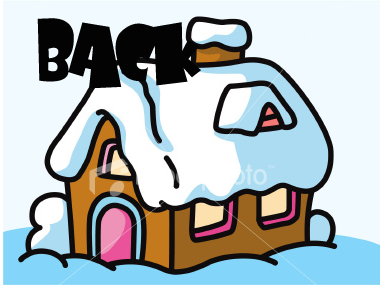
<style>
.page{position:relative;width:380px;height:285px;background:#f1faff}
.page>*{position:absolute;margin:0}
.t1{font:75.6px "BabyKruffy";color:#030303;scale:0.95 1}
</style>
<div class="page">
<p class="t1" style="left:37px;top:18px;width:164px;height:71px">BACK</p>
</div>
